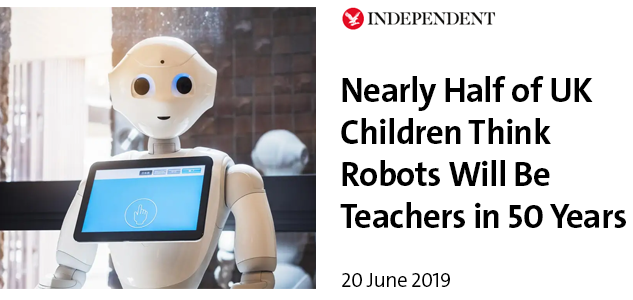
<style>
.page{position:relative;width:633px;height:300px;background:#ffffff}
.page>*{position:absolute;margin:0}
.t1{font:35px "V&ATheSansC6s-Bold";letter-spacing:-0.02em;color:#000000}
.t2{font:20.8px "V&ATheSansC6s-SemiLight";letter-spacing:-0.02em;color:#000000}
</style>
<div class="page">
<p class="t1" style="left:340px;top:76px;width:286px;height:152px">Nearly Half of UK<br>Children Think<br>Robots Will Be<br>Teachers in 50 Years</p>
<p class="t2" style="left:342px;top:273px;width:108px;height:14px">20 June 2019</p>
</div>
